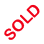
<style>
.page{position:relative;width:44px;height:44px;background:#ffffff}
.page>*{position:absolute;margin:0}
.t1{font:16px "ArialRoundedMTBold";color:#f00319}
</style>
<div class="page">
<p class="t1" style="left:4px;top:4px;width:36px;height:36px;rotate:-45deg">SOLD</p>
</div>
